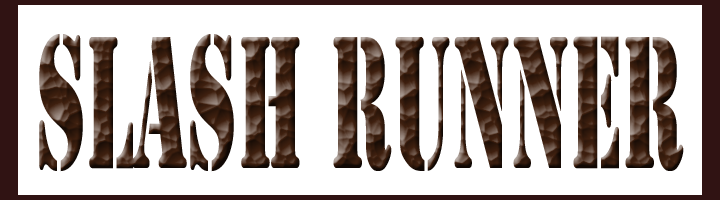
<style>
.page{position:relative;width:720px;height:200px;background:#ffffff}
.page>*{position:absolute;margin:0}
.t1{font:175.2px "StencilStd";scale:0.45 1}
</style>
<div class="page">
<p class="t1" style="left:39px;top:34px;width:645px;height:138px">Slash Runner</p>
</div>
